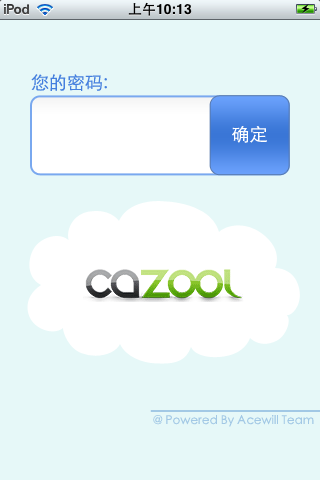
<style>
.page{position:relative;width:320px;height:480px;background:#e6f8f8}
.page>*{position:absolute;margin:0}
.t1{font:18px "STXihei";color:#447fde}
.t2{font:18px "STXihei";color:#ffffff}
.t3{font:12px "STXihei";color:#a2c8e5}
</style>
<div class="page">
<p class="t1" style="left:31px;top:74px;width:76px;height:17px">您的密码:</p>
<p class="t2" style="left:232px;top:126px;width:35px;height:17px">确定</p>
<p class="t3" style="left:153px;top:415px;width:161px;height:12px">@ Powered By Acewill Team</p>
</div>
